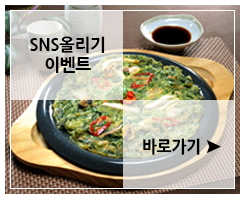
<style>
.page{position:relative;width:240px;height:200px}
.page>*{position:absolute;margin:0}
.t1{font:16.7px/20.8px "NanumGothicExtraBold";letter-spacing:-0.01em;color:#000000}
.t2{font:16.9px "NanumGothicExtraBold";letter-spacing:-0.01em;color:#000000;scale:0.93 1}
</style>
<div class="page">
<p class="t1" style="left:30px;top:36px;width:75px;height:37px;text-align:center">SNS올리기<br>이벤트</p>
<p class="t2" style="left:143px;top:138px;width:57px;height:17px">바로가기</p>
</div>
